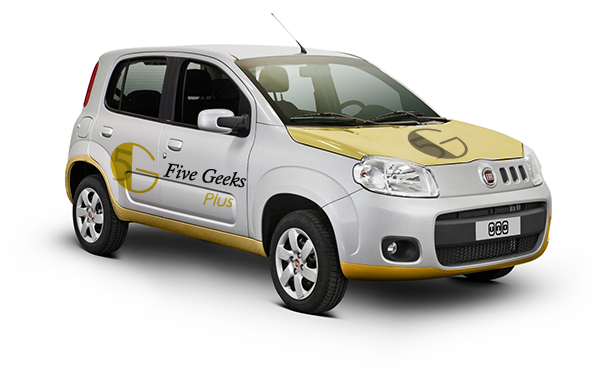
<style>
.page{position:relative;width:600px;height:367px;background:#ffffff}
.page>*{position:absolute;margin:0}
.t1{font:75.7px "Broadway";color:#786f4f;scale:0.75 1}
.t2{font:53px "Constantia";color:#5b5540;scale:0.75 1}
.t3{font:69.1px "Broadway"}
.t4{font:48.4px "Constantia";color:#7c660b}
.t5{font:20px "CalistoMT-Italic";color:#010101}
.t6{font:17px "CenturyGothic";color:#a58b0f}
</style>
<div class="page">
<p class="t1" style="left:407px;top:128px;width:61px;height:31px;rotate:-20deg">G</p>
<p class="t2" style="left:408px;top:136px;width:38px;height:24px;rotate:-20deg">5</p>
<p class="t3" style="left:110px;top:142px;width:49px;height:52px;rotate:15deg">G</p>
<p class="t4" style="left:113px;top:147px;width:19px;height:34px;rotate:15deg">5</p>
<p class="t5" style="left:163px;top:163px;width:83px;height:25px;rotate:8deg">Five Geeks</p>
<p class="t6" style="left:203px;top:192px;width:31px;height:16px;rotate:6deg">Plus</p>
</div>
